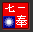
<style>
.page{position:relative;width:33px;height:32px;background:#f20000}
.page>*{position:absolute;margin:0}
.t1{font:10.4px "SimSun";color:#ffffff}
.t2{font:11.7px "SimSun";color:#ffffff}
</style>
<div class="page">
<p class="t1" style="left:5px;top:4px;width:20px;height:8px">七一</p>
<p class="t2" style="left:16px;top:15px;width:11px;height:12px">奉</p>
</div>
